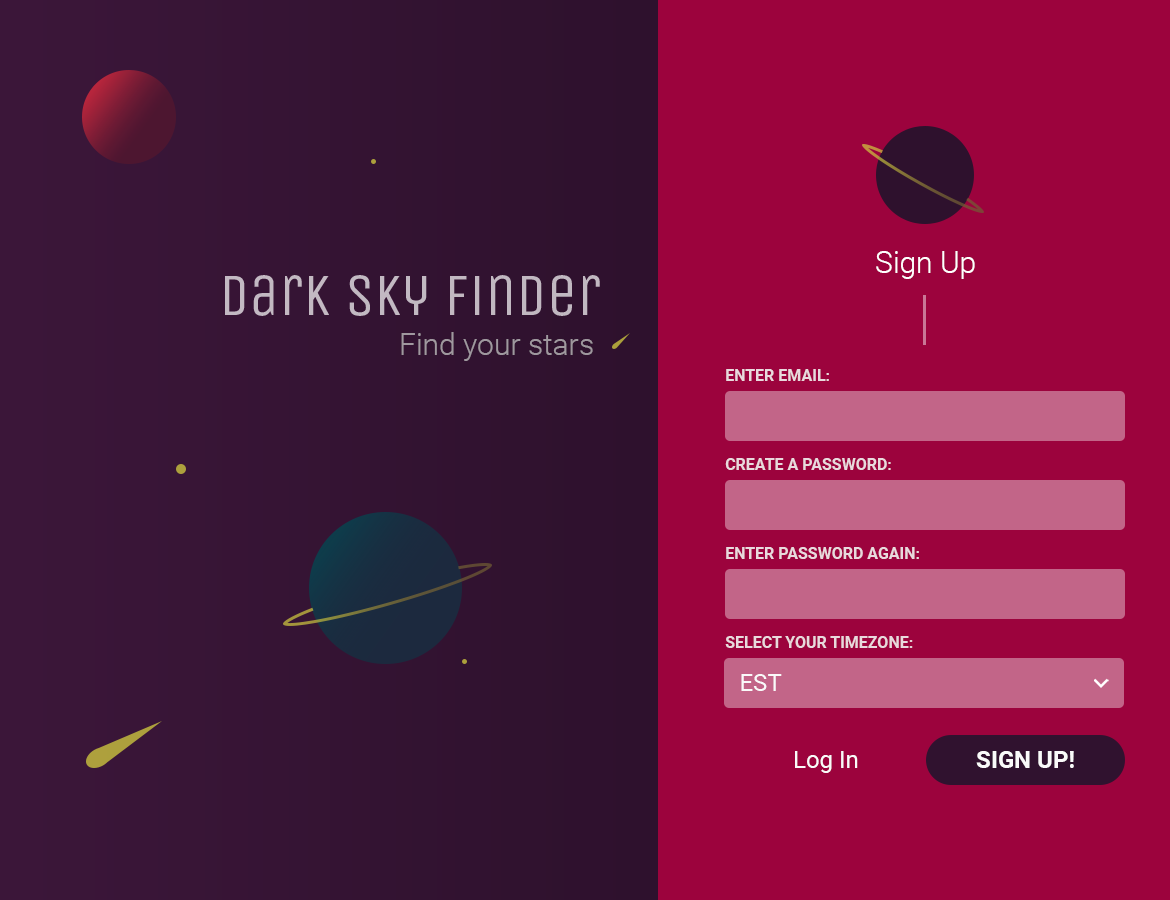
<style>
.page{position:relative;width:1170px;height:900px;background:#9c033d}
.page>*{position:absolute;margin:0}
.t1{font:30px "Roboto-Light";color:#ffffff}
.t2{font:60px "UnicaOne-Regular";color:#c2b9c2}
.t3{font:30px "Roboto-Light";color:#9f989f}
.t4{font:16px "Roboto-Bold";color:#e9d9dd}
.t5{font:24px "Roboto-Regular";color:#fafafa}
.t6{font:24px "Roboto-Bold";color:#fafafa}
</style>
<div class="page">
<p class="t1" style="left:876px;top:251px;width:99px;height:28px">Sign Up</p>
<p class="t2" style="left:225px;top:275px;width:375px;height:41px">Dark Sky Finder</p>
<p class="t3" style="left:401px;top:332px;width:192px;height:29px">Find your stars</p>
<p class="t4" style="left:726px;top:369px;width:103px;height:12px">ENTER EMAIL:</p>
<p class="t4" style="left:725px;top:458px;width:166px;height:12px">CREATE A PASSWORD:</p>
<p class="t4" style="left:726px;top:547px;width:193px;height:12px">ENTER PASSWORD AGAIN:</p>
<p class="t4" style="left:725px;top:636px;width:188px;height:12px">SELECT YOUR TIMEZONE:</p>
<p class="t5" style="left:741px;top:674px;width:41px;height:17px">EST</p>
<p class="t5" style="left:795px;top:751px;width:63px;height:22px">Log In</p>
<p class="t6" style="left:976px;top:751px;width:98px;height:17px">SIGN UP!</p>
</div>
